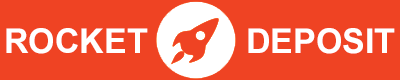
<style>
.page{position:relative;width:400px;height:80px;background:#ef4323}
.page>*{position:absolute;margin:0}
.t1{font:34px "Arial-BoldMT";color:#ffffff;text-transform:uppercase}
</style>
<div class="page">
<p class="t1" style="left:6px;top:28px;width:142px;height:26px">ROCKET</p>
<p class="t1" style="left:248px;top:28px;width:147px;height:26px">DEPOSIT</p>
</div>
